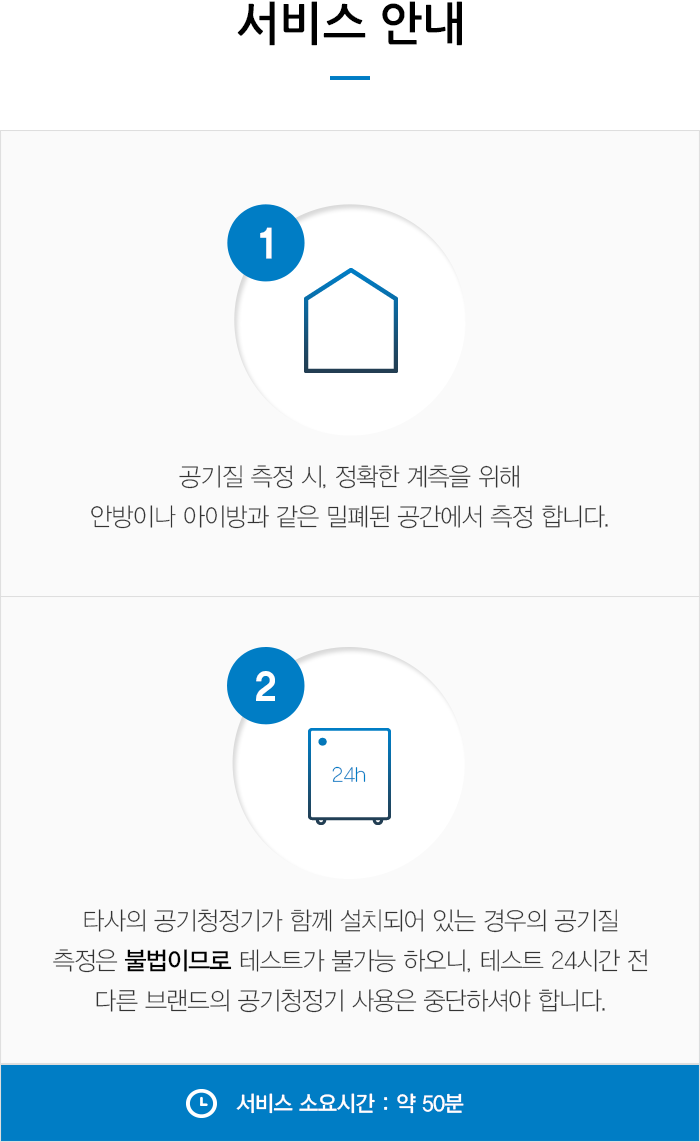
<style>
.page{position:relative;width:700px;height:1142px;background:#fafafa}
.page>*{position:absolute;margin:0}
.t1{font:46px "NanumGothicBold";color:#000000}
.t2{font:40px "YDVYGO36";color:#ffffff;scale:0.95 1}
.t3{font:25px/40px "YDVYGO31";letter-spacing:-0.025em;color:#333333;scale:0.95 1}
.t4{font:39px "YDVYGO36";color:#ffffff;scale:0.95 1}
.t5{font:20.7px "YDVYGO31";color:#007dc5}
.t6{font:25px/40px "YDVYGO33";letter-spacing:-0.025em;color:#000000;scale:0.95 1}
.t7{font:22px "YDVYGO33";letter-spacing:-0.025em;color:#ffffff;scale:0.95 1}
</style>
<div class="page">
<p class="t1" style="left:237px;top:1px;width:225px;height:45px">서비스 안내</p>
<p class="t2" style="left:260px;top:227px;width:12px;height:32px">1</p>
<p class="t3" style="left:91px;top:465px;width:517px;height:64px;text-align:center">공기질 측정 시, 정확한 계측을 위해<br>안방이나 아이방과 같은 밀폐된 공간에서 측정 합니다.</p>
<p class="t4" style="left:256px;top:671px;width:19px;height:30px">2</p>
<p class="t5" style="left:332px;top:766px;width:34px;height:16px">24h</p>
<p class="t3" style="left:53px;top:909px;width:595px;height:104px;text-align:center">타사의 공기청정기가 함께 설치되어 있는 경우의 공기질<br>측정은 <span class="t6">불법이므로 </span>테스트가 불가능 하오니, 테스트 24시간 전<br>다른 브랜드의 공기청정기 사용은 중단하셔야 합니다.</p>
<p class="t7" style="left:236px;top:1093px;width:228px;height:21px">서비스 소요시간 : 약 50분</p>
</div>
